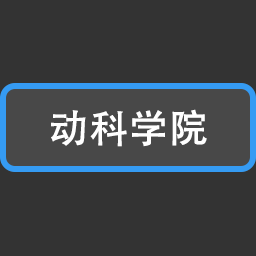
<style>
.page{position:relative;width:256px;height:256px;background:#333333}
.page>*{position:absolute;margin:0}
.t1{font:39px "AdobeHeitiStd-Regular";color:#ffffff;font-weight:bold}
</style>
<div class="page">
<p class="t1" style="left:51px;top:109px;width:156px;height:38px">动科学院</p>
</div>
